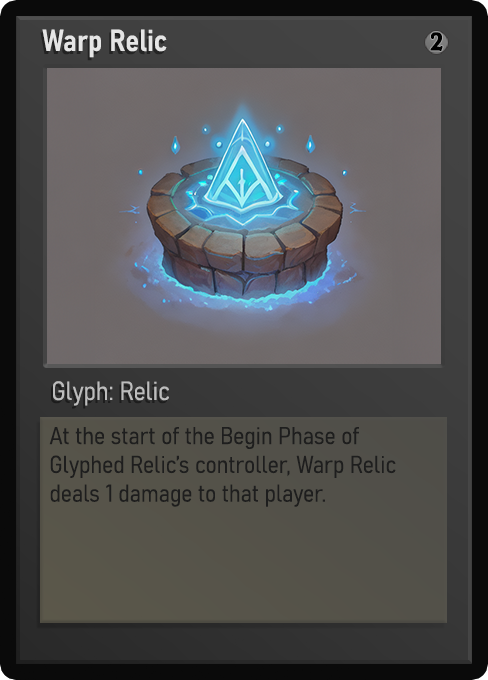
<style>
.page{position:relative;width:488px;height:680px}
.page>*{position:absolute;margin:0}
.t1{font:30px "Bahnschrift-SemiBoldSemiCondensed";color:#f2f2f2;font-weight:bold}
.t2{font:25px "WTRRoycroft";color:#000000;font-weight:bold;scale:1.09 1}
.t3{font:26px "Bahnschrift-LightSemiCondensed";color:#c8c8c8;font-weight:bold}
.t4{font:24px "Bahnschrift-LightSemiCondensed";color:#1e1e1e;font-weight:bold}
</style>
<div class="page">
<p class="t1" style="left:42px;top:29px;width:125px;height:29px;opacity:0.9">Warp Relic</p>
<p class="t2" style="left:430px;top:32px;width:13px;height:19px">2</p>
<p class="t3" style="left:53px;top:381px;width:116px;height:25px;opacity:0.9">Glyph: Relic</p>
<p class="t4" style="left:49px;top:427px;width:347px;height:80px">At the start of the Begin Phase of Glyphed Relic’s controller, Warp Relic deals 1 damage to that player.</p>
</div>
